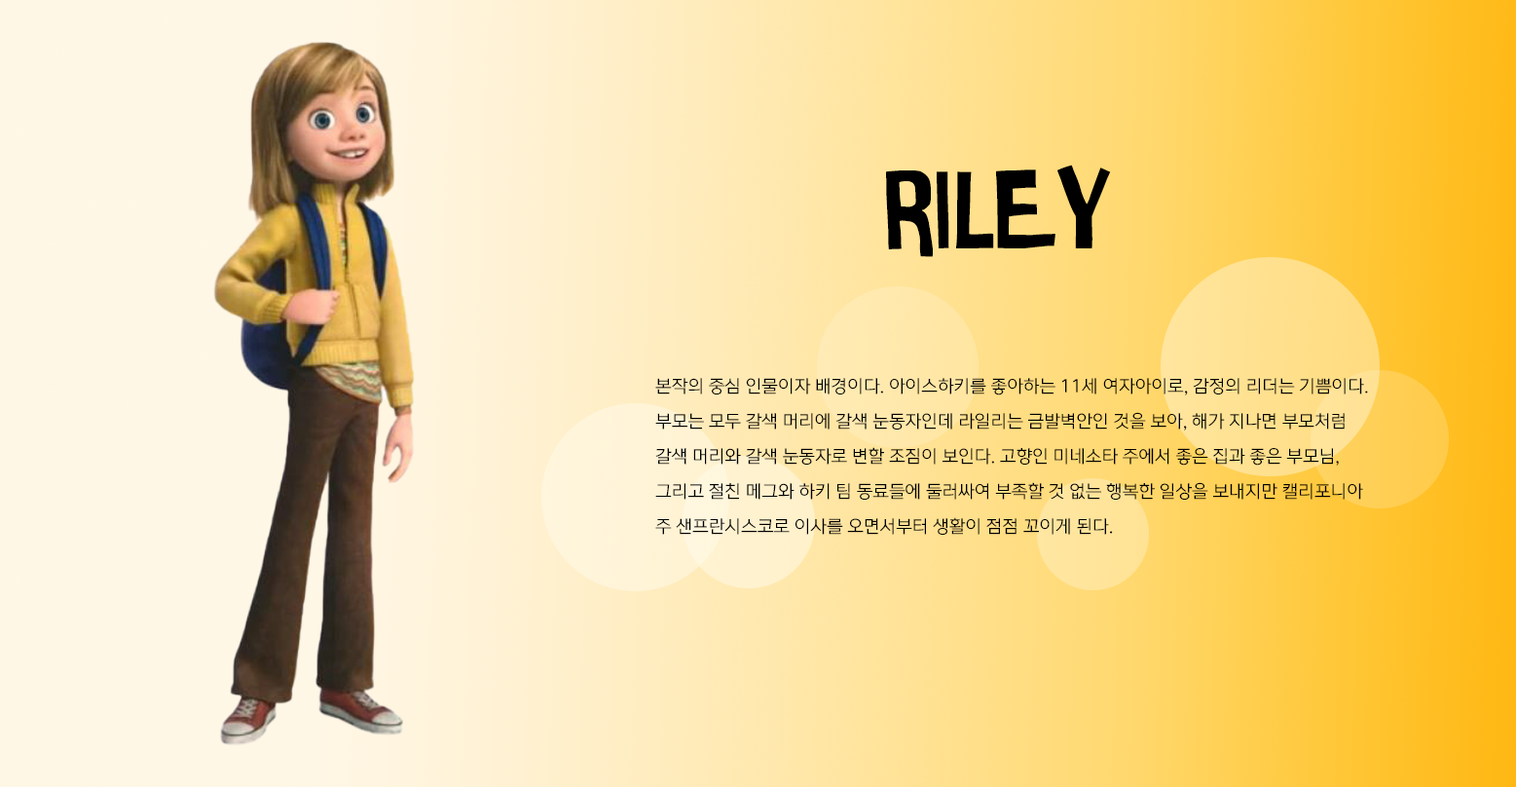
<style>
.page{position:relative;width:1516px;height:787px}
.page>*{position:absolute;margin:0}
.t1{font:109.2px "IntensaFuente";color:#000000}
.t2{font:17.5px/35px "ONEMobileRegular";color:#000000}
</style>
<div class="page">
<p class="t1" style="left:886px;top:165px;width:225px;height:92px">RILEY</p>
<p class="t2" style="left:655px;top:378px;width:713px;height:156px;text-align:justify">본작의 중심 인물이자 배경이다. 아이스하키를 좋아하는 11세 여자아이로, 감정의 리더는 기쁨이다. <br>부모는 모두 갈색 머리에 갈색 눈동자인데 라일리는 금발벽안인 것을 보아, 해가 지나면 부모처럼 <br>갈색 머리와 갈색 눈동자로 변할 조짐이 보인다. 고향인 미네소타 주에서 좋은 집과 좋은 부모님, <br>그리고 절친 메그와 하키 팀 동료들에 둘러싸여 부족할 것 없는 행복한 일상을 보내지만 캘리포니아 <br>주 샌프란시스코로 이사를 오면서부터 생활이 점점 꼬이게 된다.</p>
</div>
